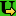
<style>
.page{position:relative;width:16px;height:16px;background:#39c918}
.page>*{position:absolute;margin:0}
.t1{font:18px "Georgia-Bold";color:#000000}
</style>
<div class="page">
<p class="t1" style="left:0px;top:1px;width:15px;height:13px">U</p>
</div>
